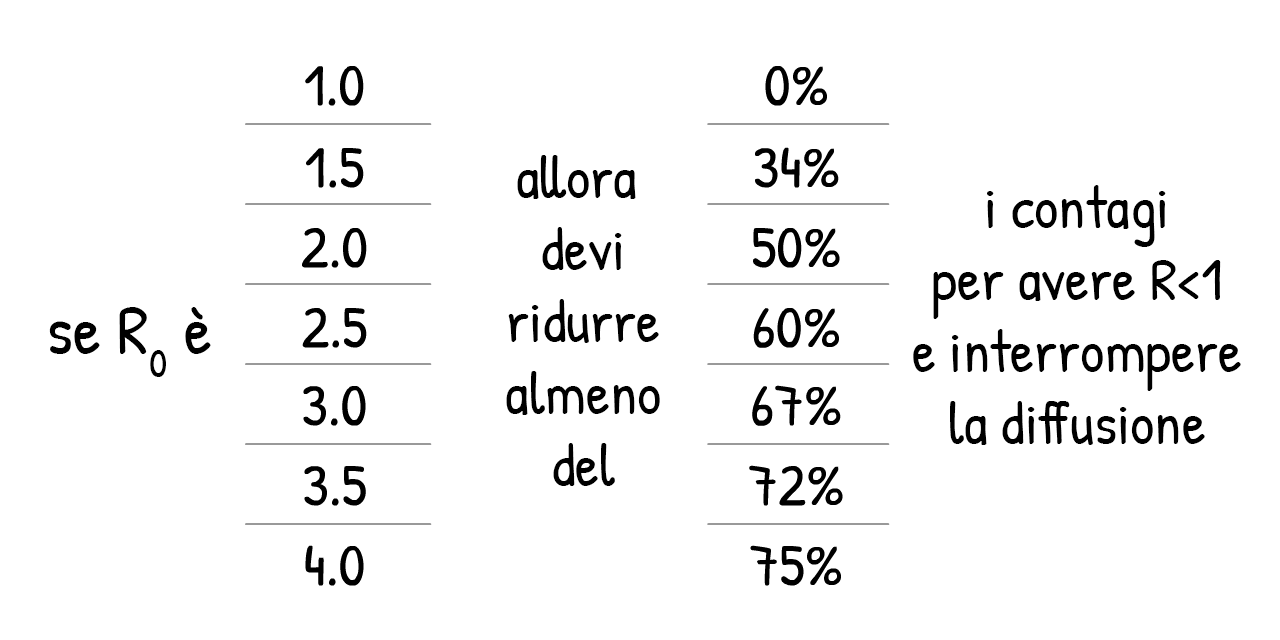
<style>
.page{position:relative;width:1280px;height:640px;background:#ffffff}
.page>*{position:absolute;margin:0}
.t1{font:60px "PatrickHand-Regular";color:#000000}
.t2{font:70px "PatrickHand-Regular";color:#000000}
</style>
<div class="page">
<p class="t1" style="left:506px;top:155px;width:154px;height:331px;text-align:center">allora <br>devi<br>ridurre<br>almeno<br>del</p>
<p class="t1" style="left:913px;top:185px;width:328px;height:260px;text-align:center">i contagi<br>per avere R&lt;1<br>e interrompere<br>la diffusione</p>
<p class="t2" style="left:49px;top:307px;width:162px;height:70px">se R0 è</p>
</div>
